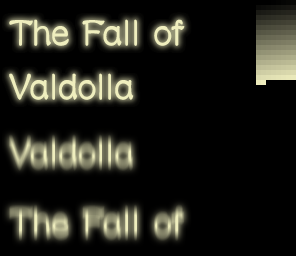
<style>
.page{position:relative;width:296px;height:256px;background:#000000}
.page>*{position:absolute;margin:0}
.t1{font:48.4px/54px "DFLeiShoStd-W5";letter-spacing:-0.025em;color:#efeebe;scale:0.82 1}
</style>
<div class="page">
<p class="t1" style="left:9px;top:19px;width:176px;height:81px">The Fall of<br>Valdolla</p>
</div>
